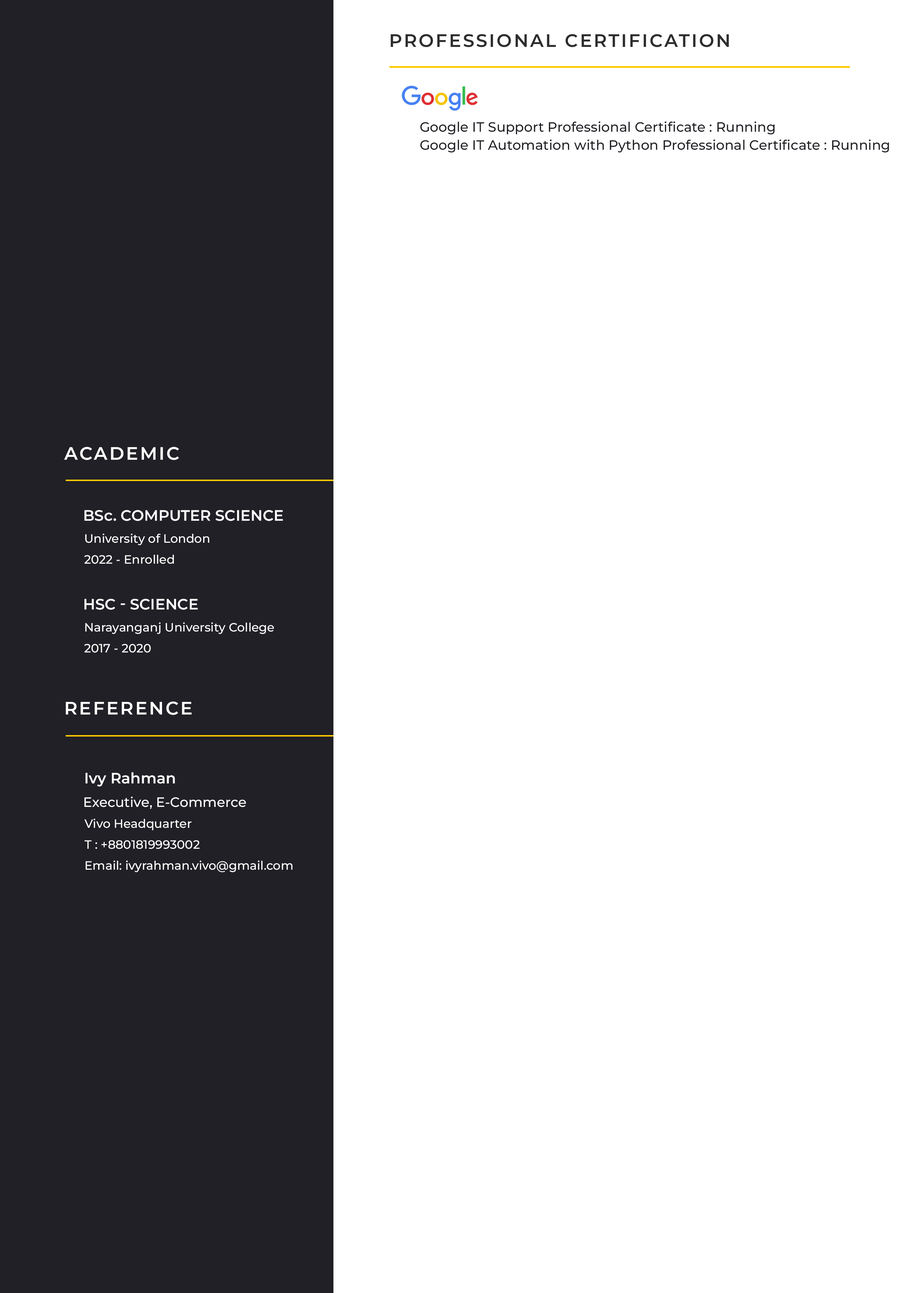
<style>
.page{position:relative;width:922px;height:1293px;background:#ffffff}
.page>*{position:absolute;margin:0}
.t1{font:18px "Montserrat-SemiBold";letter-spacing:0.1em;color:#2d2d2d;text-transform:uppercase}
.t2{font:13.5px "Montserrat-Medium";color:#202026}
.t3{font:18px "Montserrat-SemiBold";letter-spacing:0.1em;color:#ffffff;text-transform:uppercase}
.t4{font:15px "Montserrat-SemiBold";color:#ffffff;text-transform:uppercase}
.t5{font:15px "Montserrat-SemiBold";color:#ffffff}
.t6{font:12px/21.1px "Montserrat-Medium";color:#ffffff}
.t7{font:13.5px "Montserrat-Medium";color:#ffffff}
</style>
<div class="page">
<p class="t1" style="left:391px;top:34px;width:338px;height:13px">Professional Certification</p>
<p class="t2" style="left:420px;top:121px;width:355px;height:14px">Google IT Support Professional Certificate : Running</p>
<p class="t2" style="left:420px;top:139px;width:469px;height:14px">Google IT Automation with Python Professional Certificate : Running</p>
<p class="t3" style="left:64px;top:447px;width:115px;height:13px">Academic</p>
<p class="t4" style="left:84px;top:510px;width:199px;height:11px">BS<span class="t5">c</span>. Computer Science</p>
<p class="t6" style="left:84px;top:533px;width:125px;height:31px">University of London<br>2022 - Enrolled</p>
<p class="t4" style="left:84px;top:599px;width:114px;height:11px">HSC - Science</p>
<p class="t6" style="left:84px;top:622px;width:190px;height:31px">Narayanganj University College<br>2017 - 2020</p>
<p class="t3" style="left:66px;top:702px;width:126px;height:13px">reference</p>
<p class="t5" style="left:86px;top:772px;width:89px;height:15px">Ivy Rahman</p>
<p class="t7" style="left:84px;top:797px;width:162px;height:12px">Executive, E-Commerce</p>
<p class="t6" style="left:84px;top:819px;width:209px;height:53px">Vivo Headquarter<br>T : +8801819993002<br>Email: ivyrahman.vivo@gmail.com</p>
</div>
